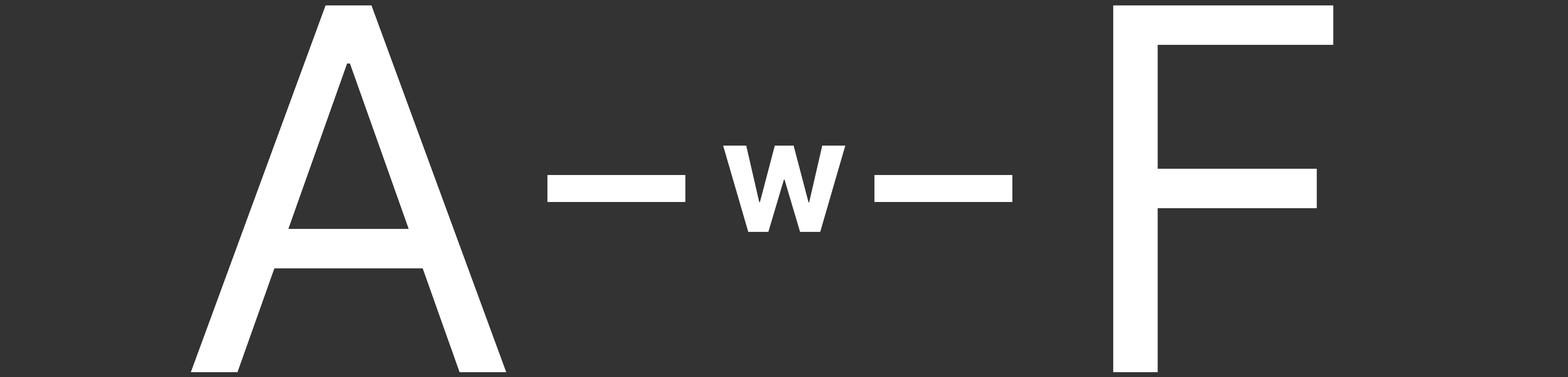
<style>
.page{position:relative;width:1568px;height:377px;background:#333333}
.page>*{position:absolute;margin:0}
.t1{font:504.4px "Inter-Regular";letter-spacing:0.02em;color:#ffffff}
.t2{font:118.6px "Inter-ExtraBold";letter-spacing:0.02em;color:#ffffff}
</style>
<div class="page">
<p class="t1" style="left:191px;top:5px;width:315px;height:367px">A</p>
<p class="t1" style="left:1113px;top:5px;width:221px;height:367px">F</p>
<p class="t2" style="left:723px;top:146px;width:122px;height:86px">W</p>
</div>
